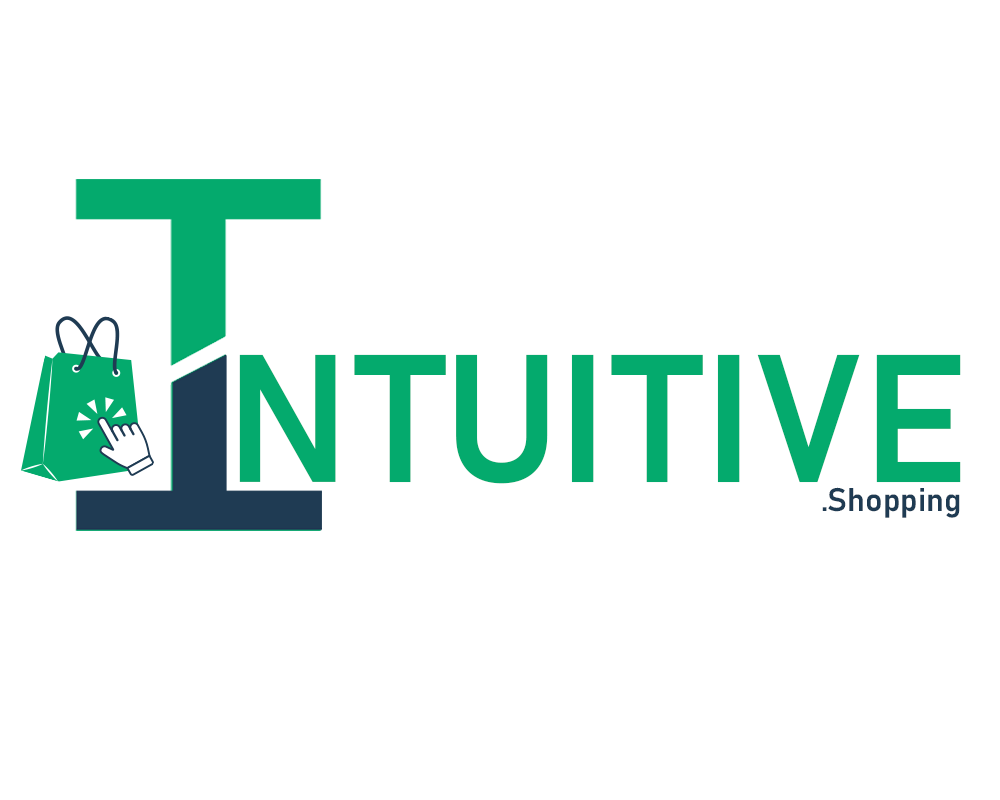
<style>
.page{position:relative;width:1000px;height:800px;background:#ffffff}
.page>*{position:absolute;margin:0}
.t1{font:178.5px "Bahnschrift-SemiBold";color:#04aa6d;text-transform:uppercase}
.t2{font:32.2px "Bahnschrift-SemiBold";color:#1f3b53}
</style>
<div class="page">
<p class="t1" style="left:239px;top:354px;width:722px;height:130px">ntuitive</p>
<p class="t2" style="left:822px;top:487px;width:138px;height:31px">.Shopping</p>
</div>
